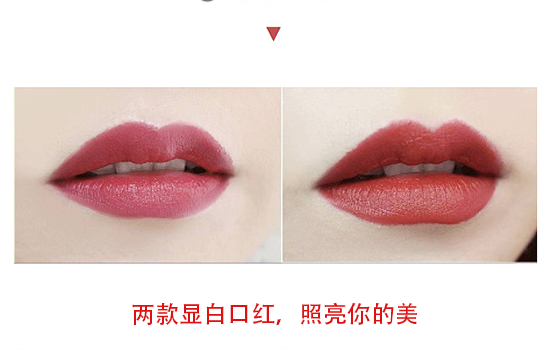
<style>
.page{position:relative;width:550px;height:350px;background:#ffffff}
.page>*{position:absolute;margin:0}
.t1{font:24px "AdobeHeitiStd-Regular";color:#df1010}
</style>
<div class="page">
<p class="t1" style="left:132px;top:302px;width:285px;height:24px">两款显白口红，照亮你的美</p>
</div>
